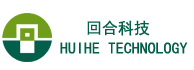
<style>
.page{position:relative;width:194px;height:70px;background:#ffffff}
.page>*{position:absolute;margin:0}
.t1{font:15.9px "SimHei";color:#035f4a}
</style>
<div class="page">
<p class="t1" style="left:87px;top:20px;width:63px;height:16px">回合科技</p>
<p class="t1" style="left:60px;top:42px;width:128px;height:12px">HUIHE TECHNOLOGY</p>
</div>
